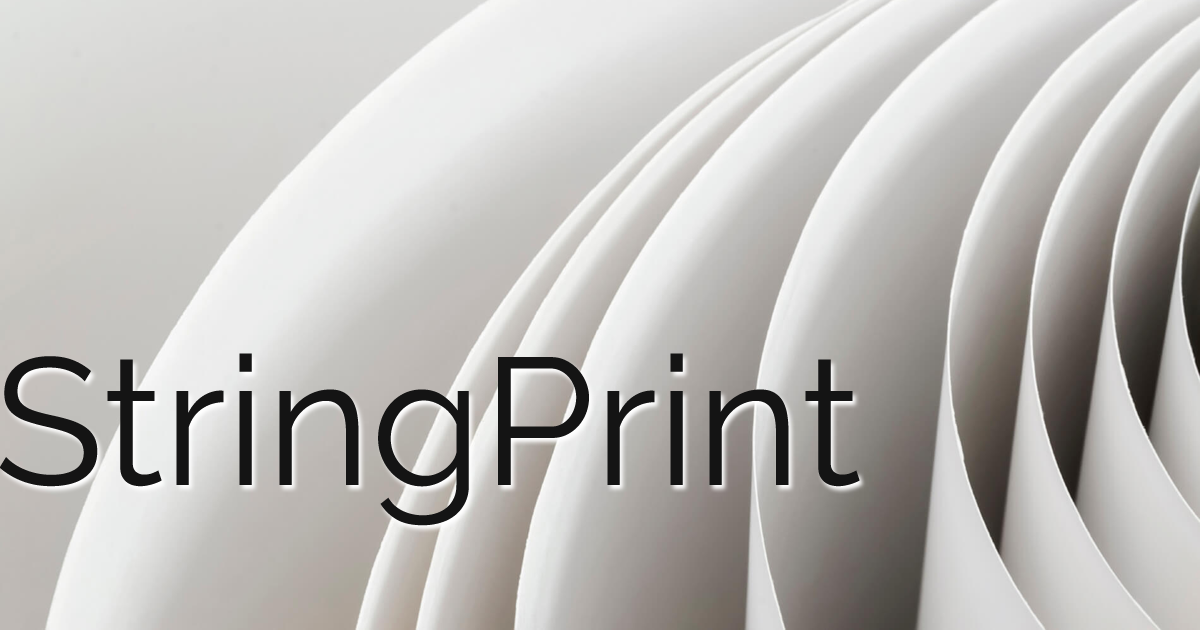
<style>
.page{position:relative;width:1200px;height:630px}
.page>*{position:absolute;margin:0}
.t1{font:180px "Raleway-Regular";color:#141414}
</style>
<div class="page">
<p class="t1" style="left:0px;top:353px;width:860px;height:173px">StringPrint</p>
</div>
